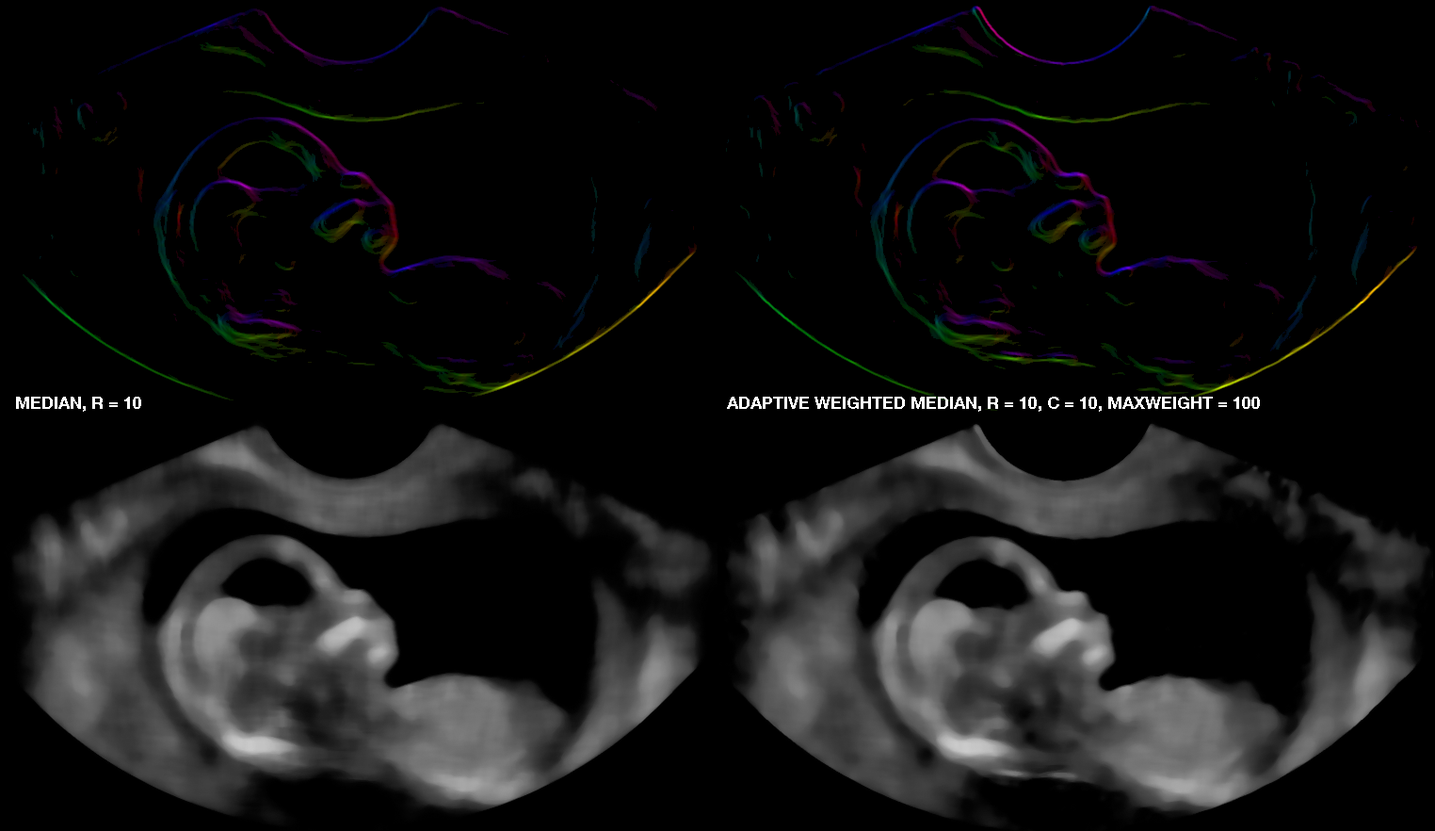
<style>
.page{position:relative;width:1435px;height:831px;background:#000000}
.page>*{position:absolute;margin:0}
.t1{font:17px "HelveticaNeue-Bold";color:#ffffff}
</style>
<div class="page">
<p class="t1" style="left:16px;top:397px;width:125px;height:15px">MEDIAN, R = 10</p>
<p class="t1" style="left:727px;top:397px;width:533px;height:15px">ADAPTIVE WEIGHTED MEDIAN, R = 10, C = 10, MAXWEIGHT = 100</p>
</div>
